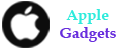
<style>
.page{position:relative;width:117px;height:50px;background:#ffffff}
.page>*{position:absolute;margin:0}
.t1{font:15.1px "BookAntiqua-Bold";color:#682edd}
.t2{font:12px "Arial-BoldMT";color:#3c3632}
.t3{font:15.1px "BookAntiqua-Bold";color:#2febdc}
</style>
<div class="page">
<p class="t1" style="left:60px;top:9px;width:56px;height:33px"><span class="t2">  </span><span class="t3">Apple<br></span>Gadgets</p>
</div>
